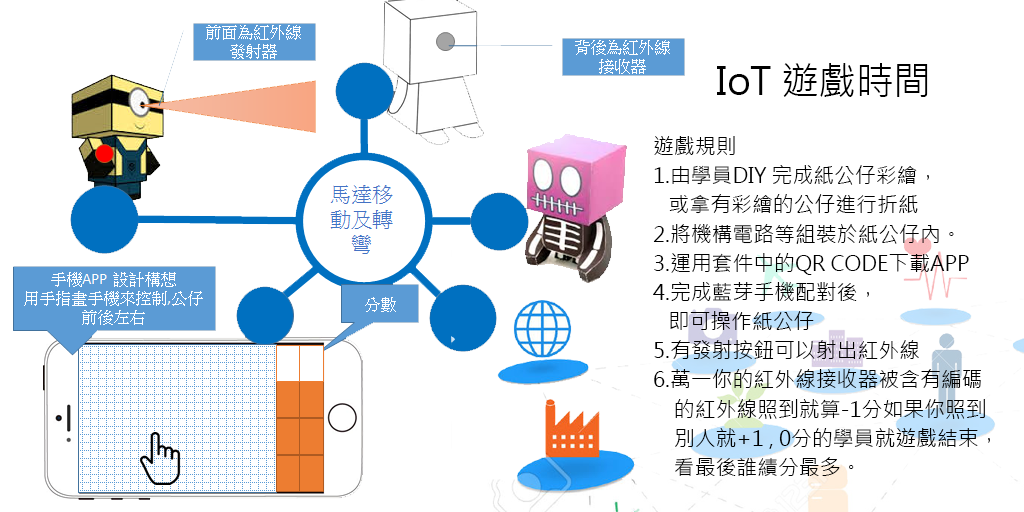
<style>
.page{position:relative;width:1024px;height:512px;background:#ffffff}
.page>*{position:absolute;margin:0}
.t1{font:37.5px "MicrosoftJhengHeiRegular";color:#000000}
.t2{font:20.8px/29.2px "MicrosoftJhengHeiRegular";color:#000000}
</style>
<div class="page">
<p class="t1" style="left:717px;top:63px;width:211px;height:34px">IoT 遊戲時間</p>
<p class="t2" style="left:653px;top:136px;width:337px;height:340px">遊戲規則<br>1.由學員DIY 完成紙公仔彩繪，<br>   或拿有彩繪的公仔進行折紙<br>2.將機構電路等組裝於紙公仔內。<br>3.運用套件中的QR CODE下載APP<br>4.完成藍芽手機配對後，<br>   即可操作紙公仔<br>5.有發射按鈕可以射出紅外線<br>6.萬一你的紅外線接收器被含有編碼<br>    的紅外線照到就算-1分如果你照到<br>    別人就+1 , 0分的學員就遊戲結束，<br>    看最後誰績分最多。</p>
</div>
